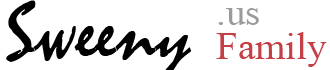
<style>
.page{position:relative;width:330px;height:70px;background:#ffffff}
.page>*{position:absolute;margin:0}
.t1{font:38.9px "MongolianBaiti";color:#9b9b9a}
.t2{font:38.9px "MongolianBaiti";color:#c53f46}
</style>
<div class="page">
<p class="t1" style="left:218px;top:8px;width:41px;height:17px">.us</p>
<p class="t2" style="left:216px;top:32px;width:111px;height:35px">Family</p>
</div>
